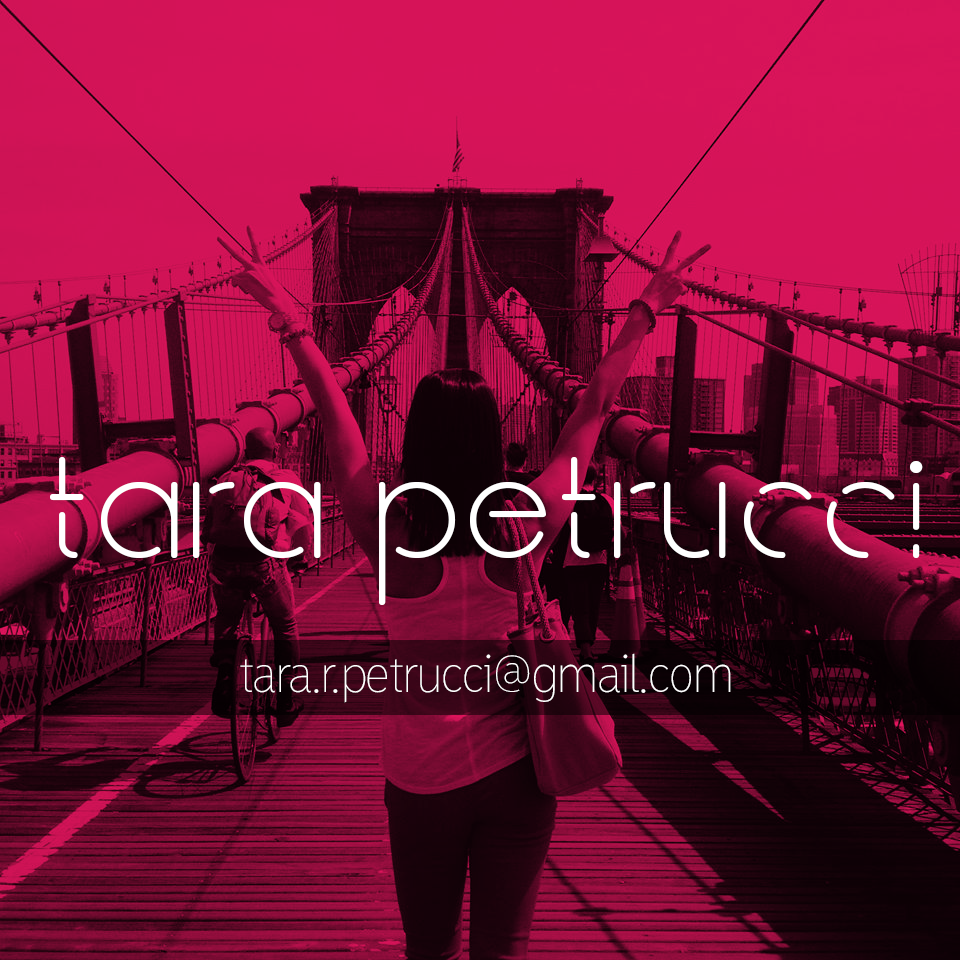
<style>
.page{position:relative;width:960px;height:960px}
.page>*{position:absolute;margin:0}
.t1{font:172px "Break-Regular";color:#ffffff}
.t2{font:50px "MadrasExtraLight";color:#ffffff}
</style>
<div class="page">
<p class="t1" style="left:50px;top:457px;width:873px;height:148px">tara petrucci</p>
<p class="t2" style="left:240px;top:653px;width:491px;height:50px">tara.r.petrucci@gmail.com</p>
</div>
